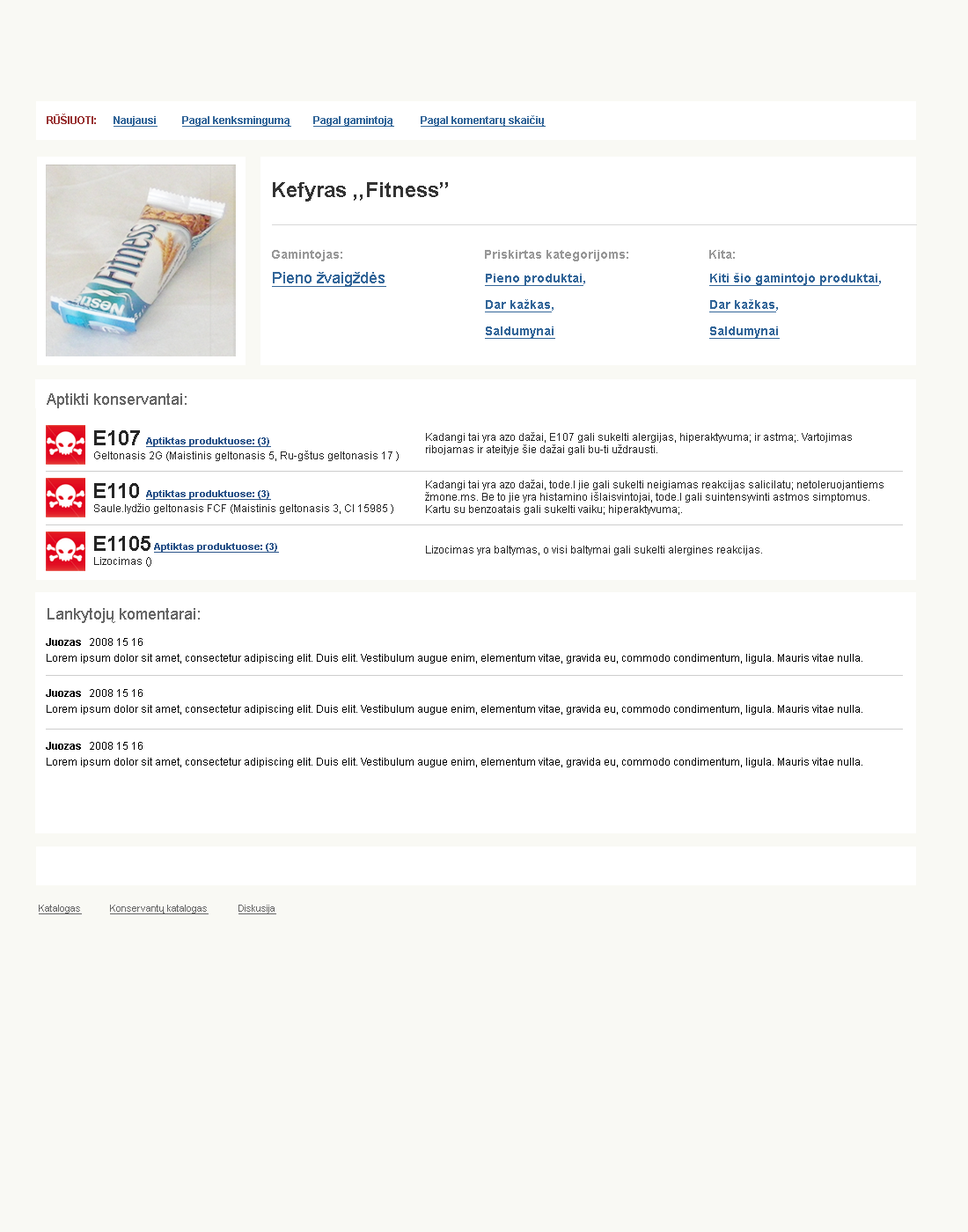
<style>
.page{position:relative;width:968px;height:1232px;background:#f9f9f4}
.page>*{position:absolute;margin:0}
.t1{font:10.6px "Arial-BoldMT";color:#993333}
.t2{font:10.6px "Arial-BoldMT";color:#336699;text-decoration:underline}
.t3{font:21.1px "Arial-BoldMT";color:#333333}
.t4{font:12.3px "Arial-BoldMT";color:#999999}
.t5{font:15.8px "ArialMT";color:#336699;text-decoration:underline}
.t6{font:12.3px/26.4px "Arial-BoldMT";color:#336699;text-decoration:underline}
.t7{font:12.3px/26.4px "Arial-BoldMT";color:#336699}
.t8{font:15.8px "ArialMT";color:#666666}
.t9{font:10.6px "Arial-BoldMT";color:#000000}
.t10{font:10.6px "ArialMT";color:#000000}
</style>
<div class="page">
<p class="t1" style="left:47px;top:114px;width:49px;height:10px">RŪŠIUOTI:</p>
<p class="t2" style="left:114px;top:116px;width:44px;height:11px">Naujausi</p>
<p class="t2" style="left:182px;top:116px;width:109px;height:11px">Pagal kenksmingumą</p>
<p class="t2" style="left:313px;top:116px;width:81px;height:11px">Pagal gamintoją</p>
<p class="t2" style="left:421px;top:115px;width:125px;height:12px">Pagal komentarų skaičių</p>
<p class="t3" style="left:273px;top:182px;width:175px;height:20px">Kefyras ,,Fitness’’</p>
<p class="t4" style="left:272px;top:250px;width:70px;height:11px">Gamintojas:</p>
<p class="t4" style="left:485px;top:250px;width:143px;height:11px">Priskirtas kategorijoms:</p>
<p class="t4" style="left:709px;top:250px;width:26px;height:9px">Kita:</p>
<p class="t5" style="left:272px;top:272px;width:114px;height:15px">Pieno žvaigždės</p>
<p class="t6" style="left:485px;top:274px;width:100px;height:65px">Pieno produktai<span class="t7">, <br></span>Dar kažkas<span class="t7">, <br></span>Saldumynai</p>
<p class="t6" style="left:709px;top:273px;width:172px;height:66px">Kiti šio gamintojo produktai<span class="t7">, <br></span>Dar kažkas<span class="t7">, <br></span>Saldumynai</p>
<p class="t8" style="left:47px;top:393px;width:140px;height:15px">Aptikti konservantai:</p>
<p class="t8" style="left:48px;top:608px;width:152px;height:15px">Lankytojų komentarai:</p>
<p class="t9" style="left:46px;top:638px;width:35px;height:8px">Juozas</p>
<p class="t10" style="left:90px;top:638px;width:53px;height:8px">2008 15 16</p>
<p class="t10" style="left:47px;top:654px;width:815px;height:9px">Lorem ipsum dolor sit amet, consectetur adipiscing elit. Duis elit. Vestibulum augue enim, elementum vitae, gravida eu, commodo condimentum, ligula. Mauris vitae nulla.</p>
<p class="t9" style="left:46px;top:689px;width:35px;height:8px">Juozas</p>
<p class="t10" style="left:90px;top:689px;width:53px;height:8px">2008 15 16</p>
<p class="t10" style="left:47px;top:705px;width:815px;height:10px">Lorem ipsum dolor sit amet, consectetur adipiscing elit. Duis elit. Vestibulum augue enim, elementum vitae, gravida eu, commodo condimentum, ligula. Mauris vitae nulla.</p>
<p class="t9" style="left:46px;top:742px;width:35px;height:8px">Juozas</p>
<p class="t10" style="left:90px;top:742px;width:53px;height:8px">2008 15 16</p>
<p class="t10" style="left:47px;top:758px;width:815px;height:9px">Lorem ipsum dolor sit amet, consectetur adipiscing elit. Duis elit. Vestibulum augue enim, elementum vitae, gravida eu, commodo condimentum, ligula. Mauris vitae nulla.</p>
</div>
